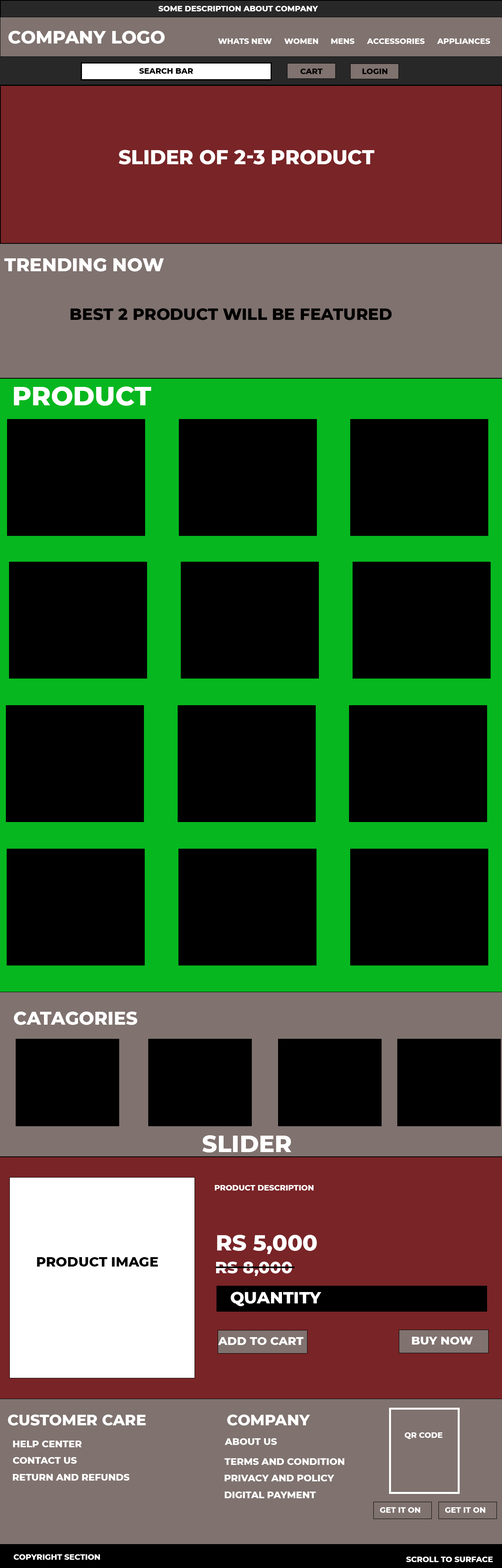
<style>
.page{position:relative;width:502px;height:1568px;background:#000000}
.page>*{position:absolute;margin:0}
.t1{font:7.7px "Montserrat-ExtraBold";color:#ffffff;text-transform:uppercase}
.t2{font:17.8px "Montserrat-ExtraBold";color:#ffffff;text-transform:uppercase}
.t3{font:7.7px "Montserrat-ExtraBold";color:#000000;text-transform:uppercase}
.t4{font:19.6px "Montserrat-ExtraBold";color:#ffffff;text-transform:uppercase}
.t5{font:18.3px "Montserrat-ExtraBold";color:#ffffff;text-transform:uppercase}
.t6{font:16.2px "Montserrat-ExtraBold";color:#000000;text-transform:uppercase}
.t7{font:26.2px "Montserrat-ExtraBold";color:#ffffff;text-transform:uppercase}
.t8{font:18.1px "Montserrat-ExtraBold";color:#ffffff;text-transform:uppercase}
.t9{font:23.4px "Montserrat-ExtraBold";color:#ffffff;text-transform:uppercase}
.t10{font:22.1px "Montserrat-ExtraBold";color:#ffffff;text-transform:uppercase}
.t11{font:13.4px "Montserrat-ExtraBold";color:#000000;text-transform:uppercase}
.t12{font:16.6px "Montserrat-ExtraBold";color:#ffffff;text-transform:uppercase}
.t13{font:16.5px "Montserrat-ExtraBold";color:#ffffff;text-transform:uppercase}
.t14{font:11.6px "Montserrat-ExtraBold";color:#ffffff;text-transform:uppercase}
.t15{font:15.1px "Montserrat-ExtraBold";color:#ffffff;text-transform:uppercase}
.t16{font:9.4px "Montserrat-ExtraBold";color:#ffffff;text-transform:uppercase}
</style>
<div class="page">
<p class="t1" style="left:158px;top:6px;width:160px;height:5px">Some Description about company</p>
<p class="t2" style="left:8px;top:31px;width:157px;height:13px">Company Logo</p>
<p class="t1" style="left:218px;top:38px;width:54px;height:6px">Whats New</p>
<p class="t1" style="left:284px;top:38px;width:34px;height:6px">WOmen</p>
<p class="t1" style="left:331px;top:38px;width:23px;height:6px">Mens</p>
<p class="t1" style="left:367px;top:38px;width:58px;height:6px">Accessories</p>
<p class="t1" style="left:437px;top:38px;width:53px;height:6px">Appliances</p>
<p class="t3" style="left:139px;top:68px;width:54px;height:6px">Search Bar</p>
<p class="t3" style="left:300px;top:69px;width:23px;height:5px">Cart</p>
<p class="t3" style="left:362px;top:69px;width:25px;height:5px">Login</p>
<p class="t4" style="left:119px;top:150px;width:255px;height:15px">Slider of 2-3 product</p>
<p class="t5" style="left:4px;top:258px;width:160px;height:14px">Trending now</p>
<p class="t6" style="left:70px;top:308px;width:322px;height:12px">Best 2 product will be featured</p>
<p class="t7" style="left:14px;top:387px;width:137px;height:19px">product</p>
<p class="t8" style="left:14px;top:1011px;width:123px;height:14px">Catagories</p>
<p class="t9" style="left:202px;top:1135px;width:89px;height:17px">slider</p>
<p class="t1" style="left:214px;top:1185px;width:100px;height:6px">Product Description</p>
<p class="t10" style="left:217px;top:1235px;width:100px;height:19px">RS 5,000</p>
<p class="t11" style="left:37px;top:1257px;width:121px;height:10px">Product Image</p>
<p class="t12" style="left:216px;top:1261px;width:76px;height:15px">RS 8,000</p>
<p class="t13" style="left:230px;top:1292px;width:91px;height:14px">Quantity</p>
<p class="t14" style="left:218px;top:1337px;width:85px;height:8px">Add to cart</p>
<p class="t14" style="left:412px;top:1337px;width:61px;height:8px">Buy Now</p>
<p class="t15" style="left:8px;top:1414px;width:138px;height:12px">Customer care</p>
<p class="t15" style="left:227px;top:1414px;width:83px;height:12px">cOMPANY</p>
<p class="t1" style="left:404px;top:1432px;width:38px;height:7px">Qr Code</p>
<p class="t16" style="left:13px;top:1441px;width:69px;height:6px">Help Center</p>
<p class="t16" style="left:225px;top:1438px;width:52px;height:7px">About Us</p>
<p class="t16" style="left:13px;top:1457px;width:64px;height:7px">Contact Us</p>
<p class="t16" style="left:224px;top:1458px;width:120px;height:7px">Terms and cONDITION</p>
<p class="t16" style="left:13px;top:1474px;width:116px;height:7px">Return and Refunds</p>
<p class="t16" style="left:224px;top:1475px;width:110px;height:6px">Privacy and policy</p>
<p class="t16" style="left:225px;top:1492px;width:91px;height:6px">Digital payment</p>
<p class="t1" style="left:379px;top:1507px;width:41px;height:6px">Get it on</p>
<p class="t1" style="left:445px;top:1507px;width:40px;height:6px">Get it on</p>
<p class="t1" style="left:13px;top:1554px;width:87px;height:6px">Copyright section</p>
<p class="t1" style="left:406px;top:1557px;width:87px;height:5px">Scroll to surface</p>
</div>
